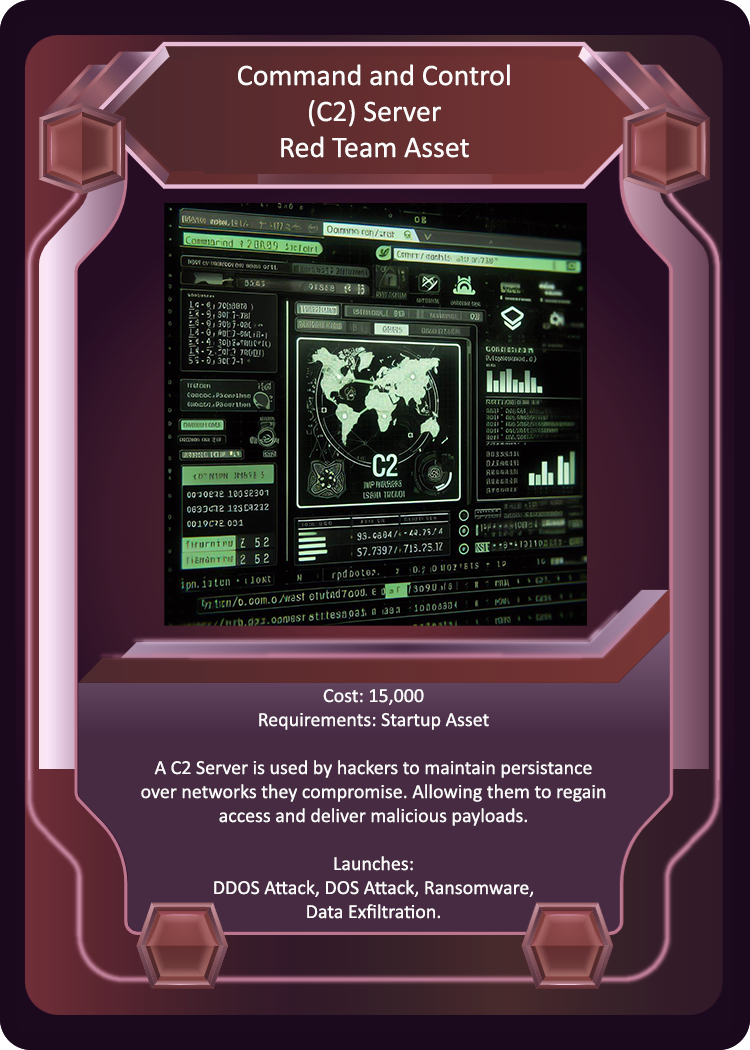
<style>
.page{position:relative;width:750px;height:1050px}
.page>*{position:absolute;margin:0}
.t1{font:30px "Calibri";color:#fcfbfb}
.t2{font:20px "Calibri";color:#fcfbfb}
</style>
<div class="page">
<p class="t1" style="left:238px;top:64px;width:272px;height:94px;text-align:center">Command and Control<br>(C2) Server<br>Red Team Asset</p>
<p class="t2" style="left:141px;top:689px;width:465px;height:230px;text-align:center">Cost: 15,000<br>Requirements: Startup Asset<br><br>A C2 Server is used by hackers to maintain persistance<br>over networks they compromise. Allowing them to regain<br>access and deliver malicious payloads.<br><br>Launches:<br>DDOS Attack, DOS Attack, Ransomware,<br>Data Exfiltration.</p>
</div>
